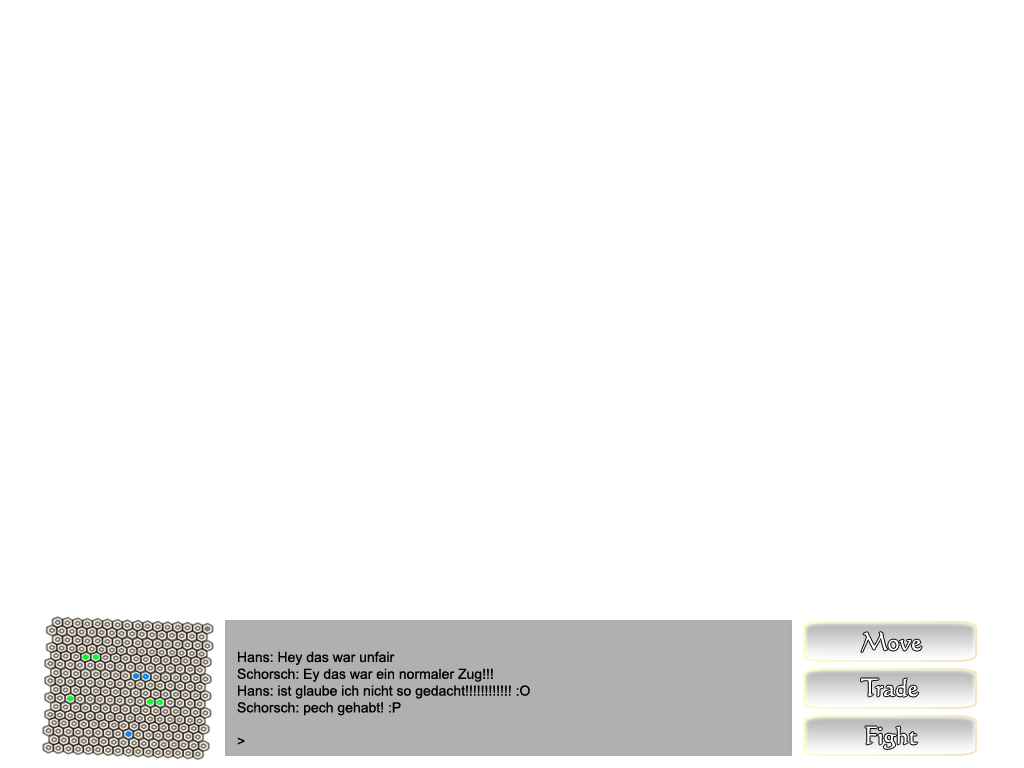
<style>
.page{position:relative;width:1024px;height:768px;background:#ffffff}
.page>*{position:absolute;margin:0}
.t1{font:14px "ArialMT";color:#000000}
.t2{font:24px "Calligraphic421BT-RomanB";color:#ffffff}
</style>
<div class="page">
<p class="t1" style="left:237px;top:651px;width:293px;height:94px">Hans: Hey das war unfair<br>Schorsch: Ey das war ein normaler Zug!!!<br>Hans: ist glaube ich nicht so gedacht!!!!!!!!!!!! :O<br>Schorsch: pech gehabt! :P<br><br>&gt;</p>
<p class="t2" style="left:861px;top:678px;width:58px;height:19px">Trade</p>
</div>
